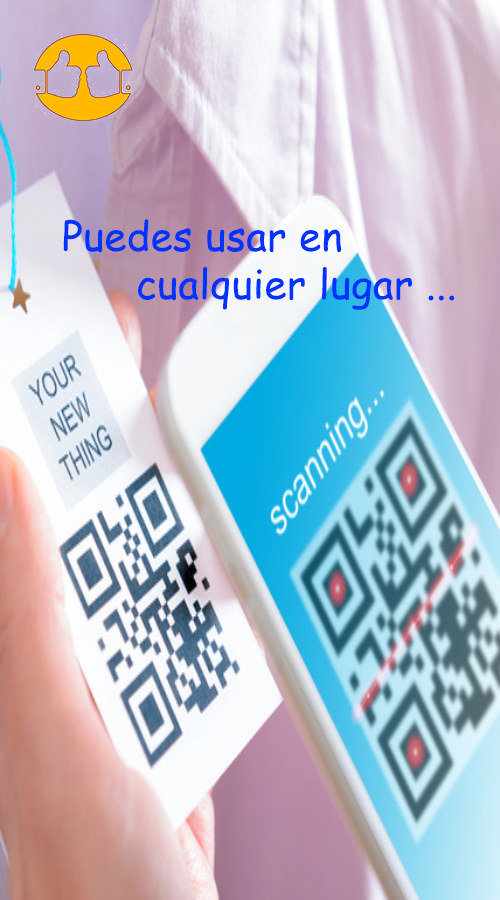
<style>
.page{position:relative;width:500px;height:900px}
.page>*{position:absolute;margin:0}
.t1{font:40px "ComicSansMS";letter-spacing:0.01em;color:#0033ff}
</style>
<div class="page">
<p class="t1" style="left:63px;top:219px;width:392px;height:91px">Puedes usar en <br>      cualquier lugar ...</p>
</div>
